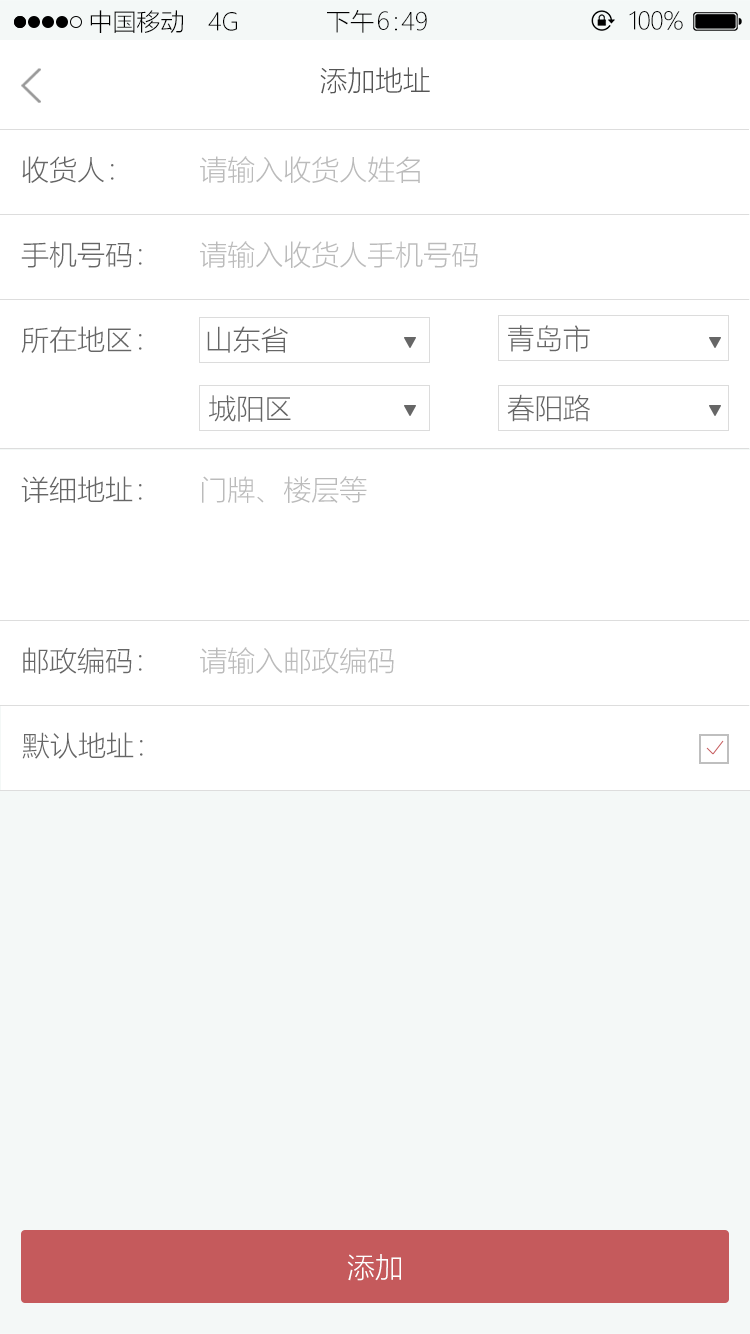
<style>
.page{position:relative;width:750px;height:1334px;background:#ffffff}
.page>*{position:absolute;margin:0}
.t1{font:24px "MicrosoftYaHeiUILight";color:#000000}
.t2{font:28px "MicrosoftYaHeiUILight";color:#555555}
.t3{font:28px "MicrosoftYaHeiUILight";color:#666666}
.t4{font:28px "MicrosoftYaHeiUILight";color:#bbbbbb}
.t5{font:28px "MicrosoftYaHeiUILight";color:#ffffff}
</style>
<div class="page">
<p class="t1" style="left:90px;top:10px;width:93px;height:23px">中国移动</p>
<p class="t1" style="left:208px;top:12px;width:29px;height:19px">4G</p>
<p class="t1" style="left:327px;top:10px;width:47px;height:23px">下午</p>
<p class="t1" style="left:378px;top:11px;width:11px;height:19px">6</p>
<p class="t1" style="left:395px;top:17px;width:2px;height:14px">：</p>
<p class="t1" style="left:401px;top:11px;width:26px;height:20px">49</p>
<p class="t1" style="left:629px;top:11px;width:54px;height:19px">100%</p>
<p class="t2" style="left:320px;top:67px;width:110px;height:27px">添加地址</p>
<p class="t3" style="left:22px;top:156px;width:92px;height:27px">收货人：</p>
<p class="t4" style="left:200px;top:156px;width:220px;height:27px">请输入收货人姓名</p>
<p class="t3" style="left:21px;top:241px;width:121px;height:27px">手机号码：</p>
<p class="t4" style="left:200px;top:241px;width:278px;height:27px">请输入收货人手机号码</p>
<p class="t3" style="left:21px;top:326px;width:121px;height:27px">所在地区：</p>
<p class="t3" style="left:207px;top:326px;width:81px;height:27px">山东省</p>
<p class="t3" style="left:508px;top:325px;width:82px;height:27px">青岛市</p>
<p class="t3" style="left:209px;top:395px;width:82px;height:27px">城阳区</p>
<p class="t3" style="left:507px;top:394px;width:83px;height:28px">春阳路</p>
<p class="t3" style="left:21px;top:476px;width:121px;height:27px">详细地址：</p>
<p class="t4" style="left:202px;top:476px;width:165px;height:27px">门牌、楼层等</p>
<p class="t3" style="left:23px;top:647px;width:119px;height:27px">邮政编码：</p>
<p class="t4" style="left:200px;top:647px;width:194px;height:27px">请输入邮政编码</p>
<p class="t3" style="left:22px;top:732px;width:121px;height:27px">默认地址：</p>
<p class="t5" style="left:347px;top:1254px;width:54px;height:27px">添加</p>
</div>
